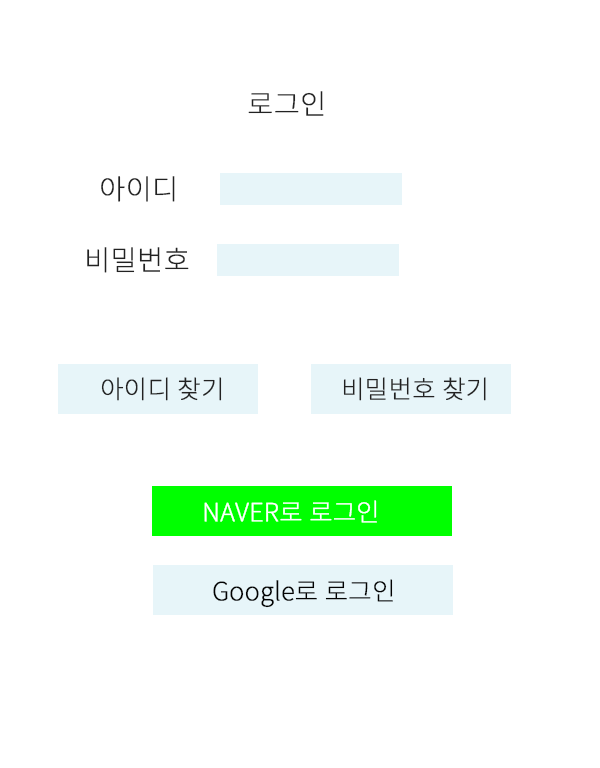
<style>
.page{position:relative;width:600px;height:768px;background:#ffffff}
.page>*{position:absolute;margin:0}
.t1{font:28px "NotoSansKR-Thin";color:#222222;font-weight:bold}
.t2{font:25px "NotoSansKR-Thin";color:#222222;font-weight:bold}
.t3{font:25px "NotoSansKR-Thin";color:#ffffff;font-weight:bold}
.t4{font:25px "NotoSansKR-Thin";color:#020202;font-weight:bold}
</style>
<div class="page">
<p class="t1" style="left:248px;top:91px;width:76px;height:25px">로그인</p>
<p class="t1" style="left:101px;top:176px;width:74px;height:26px">아이디</p>
<p class="t1" style="left:87px;top:247px;width:102px;height:26px">비밀번호</p>
<p class="t2" style="left:101px;top:377px;width:121px;height:24px">아이디 찾기</p>
<p class="t2" style="left:343px;top:377px;width:143px;height:24px">비밀번호 찾기</p>
<p class="t3" style="left:204px;top:500px;width:173px;height:23px">NAVER로 로그인</p>
<p class="t4" style="left:213px;top:579px;width:180px;height:29px">Google로 로그인</p>
</div>
